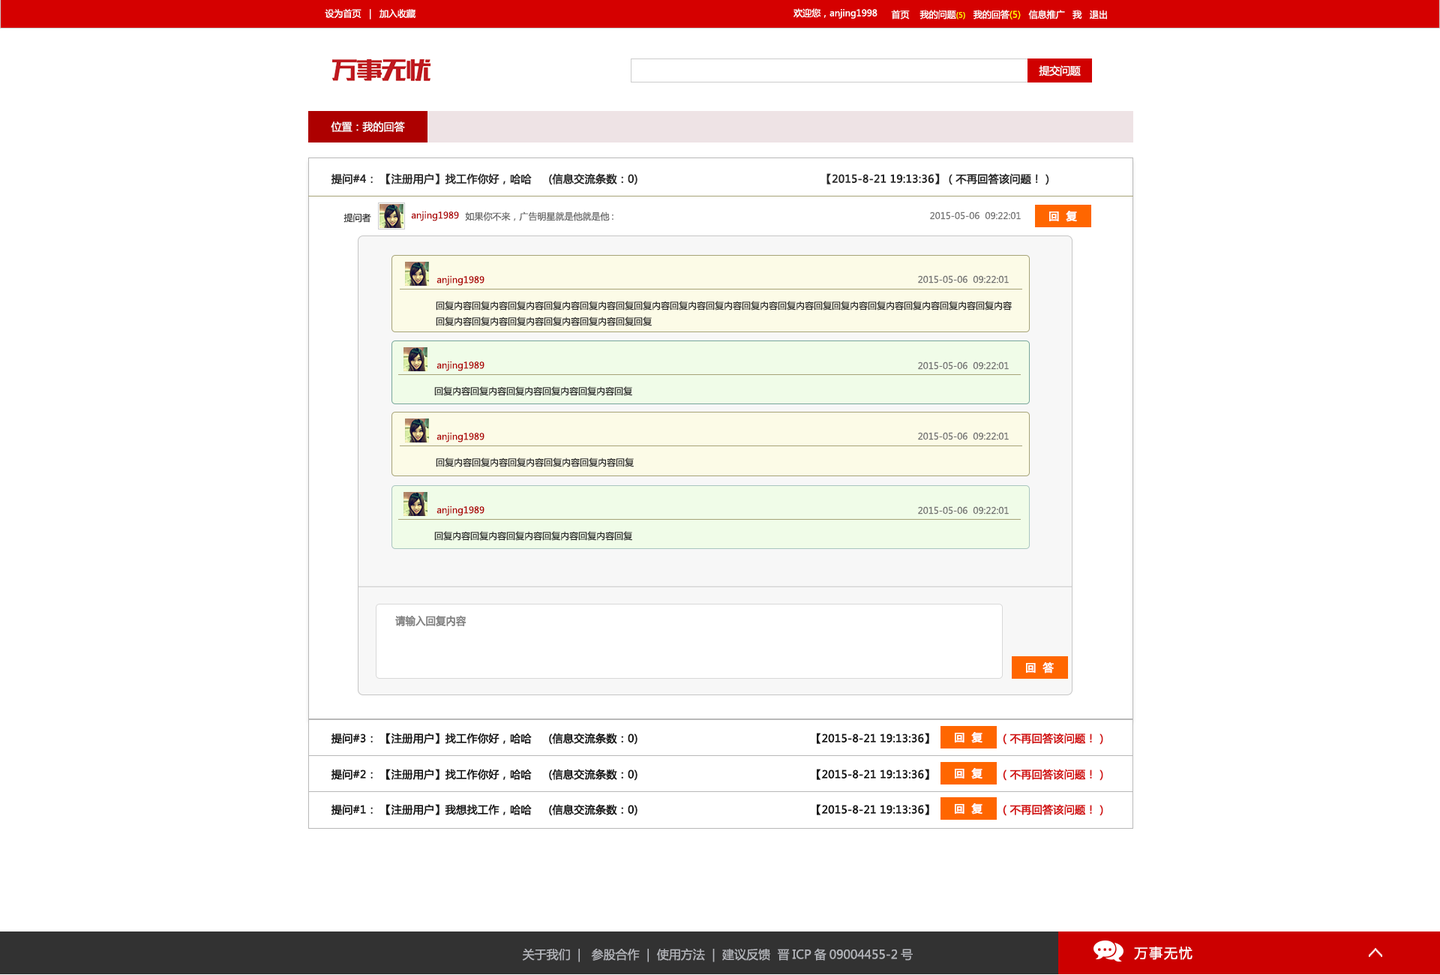
<style>
.page{position:relative;width:1440px;height:975px;background:#ffffff}
.page>*{position:absolute;margin:0}
.t1{font:9px "MicrosoftYaHei";color:#ffffff}
.t2{font:7.5px "MicrosoftYaHei";color:#fffc00}
.t3{font:9px "MicrosoftYaHei";color:#fff600}
.t4{font:10.5px "MicrosoftYaHei";letter-spacing:-0.02em;color:#ffffff}
.t5{font:10.5px "MicrosoftYaHei";color:#ffffff}
.t6{font:10.5px "MicrosoftYaHei";color:#272727;font-weight:bold}
.t7{font:9px "MicrosoftYaHei";color:#272727}
.t8{font:9px "MicrosoftYaHei";color:#ad0000}
.t9{font:9px "MicrosoftYaHei";color:#636363}
.t10{font:9px "MicrosoftYaHei";color:#727272}
.t11{font:10.5px "MicrosoftYaHei";color:#ffffff;font-weight:bold}
.t12{font:10.5px "MicrosoftYaHei";color:#808080;font-weight:bold;scale:0.94 1}
.t13{font:10.5px "MicrosoftYaHei";color:#161616;font-weight:bold}
.t14{font:10.5px "MicrosoftYaHei";color:#d21313;font-weight:bold}
.t15{font:12px "MicrosoftYaHei";color:#b3b5ba}
.t16{font:13.5px "MicrosoftYaHei";letter-spacing:0.1em;color:#ffffff}
</style>
<div class="page">
<p class="t1" style="left:325px;top:9px;width:91px;height:11px">设为首页   |   加入收藏</p>
<p class="t1" style="left:794px;top:8px;width:84px;height:11px">欢迎您，anjing1998</p>
<p class="t1" style="left:891px;top:10px;width:216px;height:10px">首页    我的问题<span class="t2">(5)</span>   我的回答<span class="t3">(5)</span>   信息推广   我   退出</p>
<p class="t4" style="left:1039px;top:65px;width:42px;height:11px">提交问题</p>
<p class="t5" style="left:331px;top:122px;width:74px;height:10px">位置：我的回答</p>
<p class="t6" style="left:331px;top:173px;width:718px;height:12px">提问#4： 【注册用户】找工作你好，哈哈     (信息交流条数：0)                                                      【2015-8-21 19:13:36】（不再回答该问题！）</p>
<p class="t7" style="left:344px;top:213px;width:27px;height:10px">提问者</p>
<p class="t8" style="left:411px;top:211px;width:48px;height:10px">anjing1989</p>
<p class="t9" style="left:465px;top:212px;width:149px;height:9px">如果你不来，广告明星就是他就是他:</p>
<p class="t10" style="left:930px;top:212px;width:91px;height:8px">2015-05-06  09:22:01</p>
<p class="t11" style="left:1049px;top:211px;width:28px;height:11px">回  复</p>
<p class="t8" style="left:436px;top:275px;width:48px;height:11px">anjing1989</p>
<p class="t10" style="left:918px;top:275px;width:91px;height:9px">2015-05-06  09:22:01</p>
<p class="t7" style="left:436px;top:301px;width:576px;height:25px">回复内容回复内容回复内容回复内容回复内容回复回复内容回复内容回复内容回复内容回复内容回复回复内容回复内容回复内容回复内容回复内容<br>回复内容回复内容回复内容回复内容回复内容回复回复</p>
<p class="t8" style="left:436px;top:361px;width:48px;height:10px">anjing1989</p>
<p class="t10" style="left:918px;top:362px;width:91px;height:8px">2015-05-06  09:22:01</p>
<p class="t7" style="left:434px;top:386px;width:198px;height:10px">回复内容回复内容回复内容回复内容回复内容回复</p>
<p class="t8" style="left:436px;top:432px;width:48px;height:10px">anjing1989</p>
<p class="t10" style="left:918px;top:432px;width:91px;height:8px">2015-05-06  09:22:01</p>
<p class="t7" style="left:436px;top:458px;width:198px;height:9px">回复内容回复内容回复内容回复内容回复内容回复</p>
<p class="t8" style="left:436px;top:506px;width:48px;height:10px">anjing1989</p>
<p class="t10" style="left:918px;top:506px;width:91px;height:8px">2015-05-06  09:22:01</p>
<p class="t7" style="left:434px;top:531px;width:198px;height:10px">回复内容回复内容回复内容回复内容回复内容回复</p>
<p class="t12" style="left:395px;top:615px;width:71px;height:11px">请输入回复内容</p>
<p class="t11" style="left:1026px;top:662px;width:28px;height:12px">回  答</p>
<p class="t13" style="left:331px;top:733px;width:772px;height:12px">提问#3： 【注册用户】找工作你好，哈哈     (信息交流条数：0)                                                   【2015-8-21 19:13:36】                   <span class="t14">（不再回答该问题！）</span></p>
<p class="t11" style="left:955px;top:732px;width:27px;height:11px">回  复</p>
<p class="t13" style="left:331px;top:769px;width:772px;height:12px">提问#2： 【注册用户】找工作你好，哈哈     (信息交流条数：0)                                                   【2015-8-21 19:13:36】                   <span class="t14">（不再回答该问题！）</span></p>
<p class="t11" style="left:955px;top:768px;width:27px;height:11px">回  复</p>
<p class="t13" style="left:331px;top:804px;width:772px;height:12px">提问#1： 【注册用户】我想找工作，哈哈     (信息交流条数：0)                                                   【2015-8-21 19:13:36】                   <span class="t14">（不再回答该问题！）</span></p>
<p class="t11" style="left:955px;top:803px;width:27px;height:11px">回  复</p>
<p class="t15" style="left:522px;top:948px;width:391px;height:14px">关于我们  |   参股合作  |  使用方法  |  建议反馈  晋ICP备09004455-2号</p>
<p class="t16" style="left:1134px;top:946px;width:58px;height:14px">万事无忧</p>
</div>
